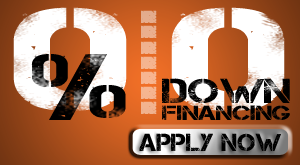
<style>
.page{position:relative;width:300px;height:165px}
.page>*{position:absolute;margin:0}
.t1{font:147px "Captureit";color:#ffffff;text-transform:uppercase;scale:1.53 1}
.t2{font:117px "Captureit";color:#f2b38f;text-transform:uppercase;scale:0.65 1}
.t3{font:91px "Captureit";color:#000000;text-transform:uppercase;scale:1.53 1}
.t4{font:34.4px "Captureit";color:#000000;text-transform:uppercase;scale:1.31 1}
.t5{font:20.6px "Captureit";color:#000000;text-transform:uppercase;scale:1.31 1}
.t6{font:24.6px "Captureit";color:#000000;text-transform:uppercase;scale:1.06 1}
</style>
<div class="page">
<p class="t1" style="left:13px;top:7px;width:114px;height:104px">0</p>
<p class="t2" style="left:141px;top:10px;width:16px;height:104px;rotate:-90deg">.......</p>
<p class="t1" style="left:171px;top:7px;width:114px;height:104px">0</p>
<p class="t3" style="left:31px;top:54px;width:95px;height:66px">%</p>
<p class="t4" style="left:162px;top:78px;width:128px;height:25px">down</p>
<p class="t5" style="left:162px;top:105px;width:128px;height:15px">financing</p>
<p class="t6" style="left:139px;top:133px;width:142px;height:18px">apply now</p>
</div>
